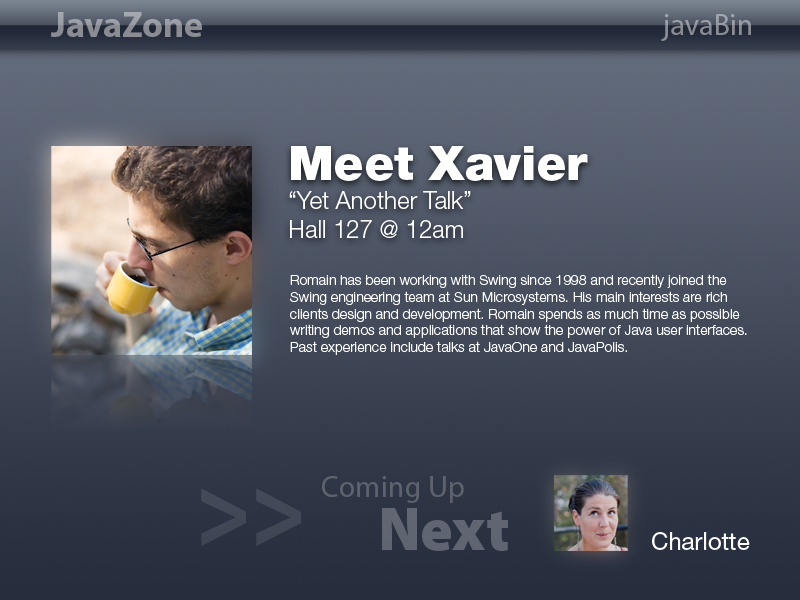
<style>
.page{position:relative;width:800px;height:600px}
.page>*{position:absolute;margin:0}
.t1{font:36px "MyriadPro-Bold";color:#8a8d93}
.t2{font:30px "MyriadPro-Regular";color:#8a8c92}
.t3{font:24px "HelveticaNeueLTStd-Lt";color:#ffffff}
.t4{font:48px "HelveticaNeueLTStd-Blk";color:#ffffff}
.t5{font:14px "HelveticaNeueLTStd-Lt";color:#ffffff}
.t6{font:30.4px "MyriadPro-Regular";color:#5e626c}
.t7{font:108.7px "MyriadPro-BlackCond";color:#424856;scale:0.84 1}
.t8{font:60.8px "MyriadPro-Black";color:#5f6571}
.t9{font:24px "HelveticaNeueLTStd-Roman";color:#ffffff}
</style>
<div class="page">
<p class="t1" style="left:50px;top:12px;width:152px;height:25px">JavaZone</p>
<p class="t2" style="left:661px;top:14px;width:90px;height:27px">javaBin</p>
<p class="t3" style="left:289px;top:146px;width:299px;height:92px"><span class="t4">Meet Xavier<br></span>“Yet Another Talk”<br>Hall 127 @ 12am</p>
<p class="t5" style="left:290px;top:274px;width:457px;height:81px">Romain has been working with Swing since 1998 and recently joined the Swing engineering team at Sun Microsystems. His main interests are rich clients design and development. Romain spends as much time as possible writing demos and applications that show the power of Java user interfaces. Past experience include talks at JavaOne and JavaPolis.</p>
<p class="t6" style="left:322px;top:476px;width:142px;height:27px">Coming Up</p>
<p class="t7" style="left:201px;top:488px;width:100px;height:58px">&gt;&gt;</p>
<p class="t8" style="left:382px;top:508px;width:126px;height:43px">Next</p>
<p class="t9" style="left:652px;top:532px;width:98px;height:18px">Charlotte</p>
</div>
